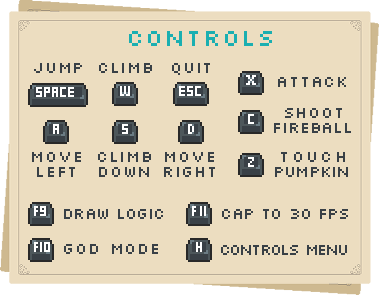
<style>
.page{position:relative;width:379px;height:295px;background:#ecddc0}
.page>*{position:absolute;margin:0}
.t1{font:23.4px "Silkscreen-Regular";letter-spacing:0.04em;color:#1aafb1;scale:1.04 1}
.t2{font:15.6px "Silkscreen-Regular";letter-spacing:0.04em;color:#394046;scale:1.04 1}
.t3{font:15.6px/15px "Silkscreen-Regular";letter-spacing:-0.02em;color:#394046;scale:1.04 1}
.t4{font:15.6px/15px "Silkscreen-Regular";letter-spacing:0.04em;color:#394046;scale:1.04 1}
.t5{font:15.6px/15px "Silkscreen-Regular";letter-spacing:-0.06em;color:#394046;scale:1.04 1}
.t6{font:15.6px/15px "Silkscreen-Regular";letter-spacing:0.14em;color:#394046;scale:1.04 1}
.t7{font:15.6px "Silkscreen-Regular";letter-spacing:-0.06em;color:#394046;scale:1.04 1}
.t8{font:15.6px "Silkscreen-Regular";letter-spacing:-0.12em;color:#394046;scale:1.04 1}
</style>
<div class="page">
<p class="t1" style="left:129px;top:31px;width:143px;height:15px">CONTROLS</p>
<p class="t2" style="left:34px;top:63px;width:48px;height:10px">JUMP</p>
<p class="t2" style="left:99px;top:63px;width:53px;height:10px">climb</p>
<p class="t2" style="left:172px;top:63px;width:38px;height:12px">QUIT</p>
<p class="t2" style="left:278px;top:77px;width:68px;height:10px">ATTACK</p>
<p class="t3" style="left:274px;top:108px;width:77px;height:25px;text-align:center"><span class="t4">SHOOT<br></span>fireball</p>
<p class="t4" style="left:32px;top:152px;width:49px;height:25px;text-align:center">MOVE<br>LEFT</p>
<p class="t4" style="left:98px;top:152px;width:53px;height:25px;text-align:center">climb<br>down</p>
<p class="t4" style="left:164px;top:152px;width:51px;height:25px;text-align:center">MOVE<br>RIGHT</p>
<p class="t5" style="left:275px;top:152px;width:73px;height:25px;text-align:center"><span class="t6">touch<br></span>pumpkin</p>
<p class="t7" style="left:64px;top:209px;width:99px;height:10px">DRAW LOGIC</p>
<p class="t7" style="left:222px;top:209px;width:126px;height:10px">CAP TO 30 FPS</p>
<p class="t2" style="left:64px;top:244px;width:94px;height:10px">god mode</p>
<p class="t8" style="left:221px;top:245px;width:126px;height:10px">CONTROLs menu</p>
</div>
